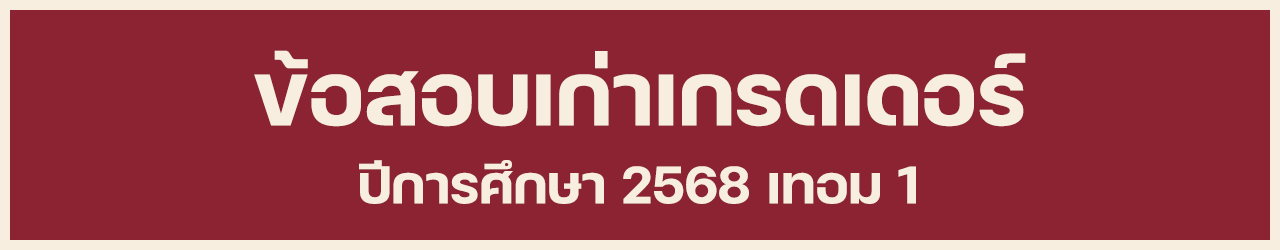
<style>
.page{position:relative;width:1280px;height:250px;background:#8b2332}
.page>*{position:absolute;margin:0}
.t1{font:120px "FCMinimalBold";color:#f8eedf}
.t2{font:72px "FCMinimalBold";color:#f8eedf}
</style>
<div class="page">
<p class="t1" style="left:254px;top:50px;width:772px;height:77px">ข้อสอบเก่าเกรดเดอร์</p>
<p class="t2" style="left:359px;top:160px;width:557px;height:44px">ปีการศึกษา 2568 เทอม 1</p>
</div>
